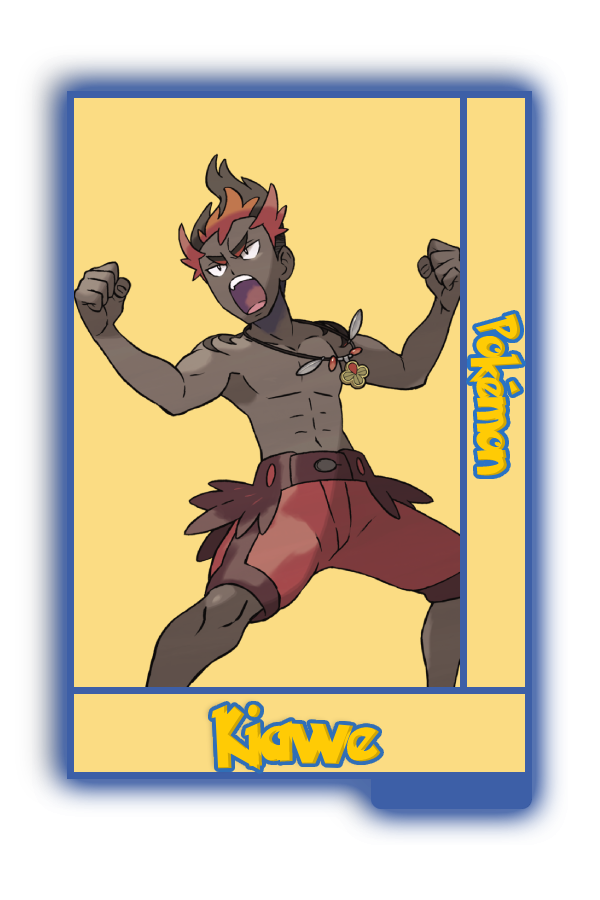
<style>
.page{position:relative;width:600px;height:900px;background:#fbdc83}
.page>*{position:absolute;margin:0}
.t1{font:48.8px "PokemonSolidNormal";color:#ffcb05;scale:0.8 1}
.t2{font:60.1px "PokemonSolidNormal";color:#ffcb05;scale:0.96 1}
</style>
<div class="page">
<p class="t1" style="left:469px;top:313px;width:54px;height:163px;rotate:90deg">Pokémon</p>
<p class="t2" style="left:211px;top:704px;width:170px;height:67px">Kiawe</p>
</div>
